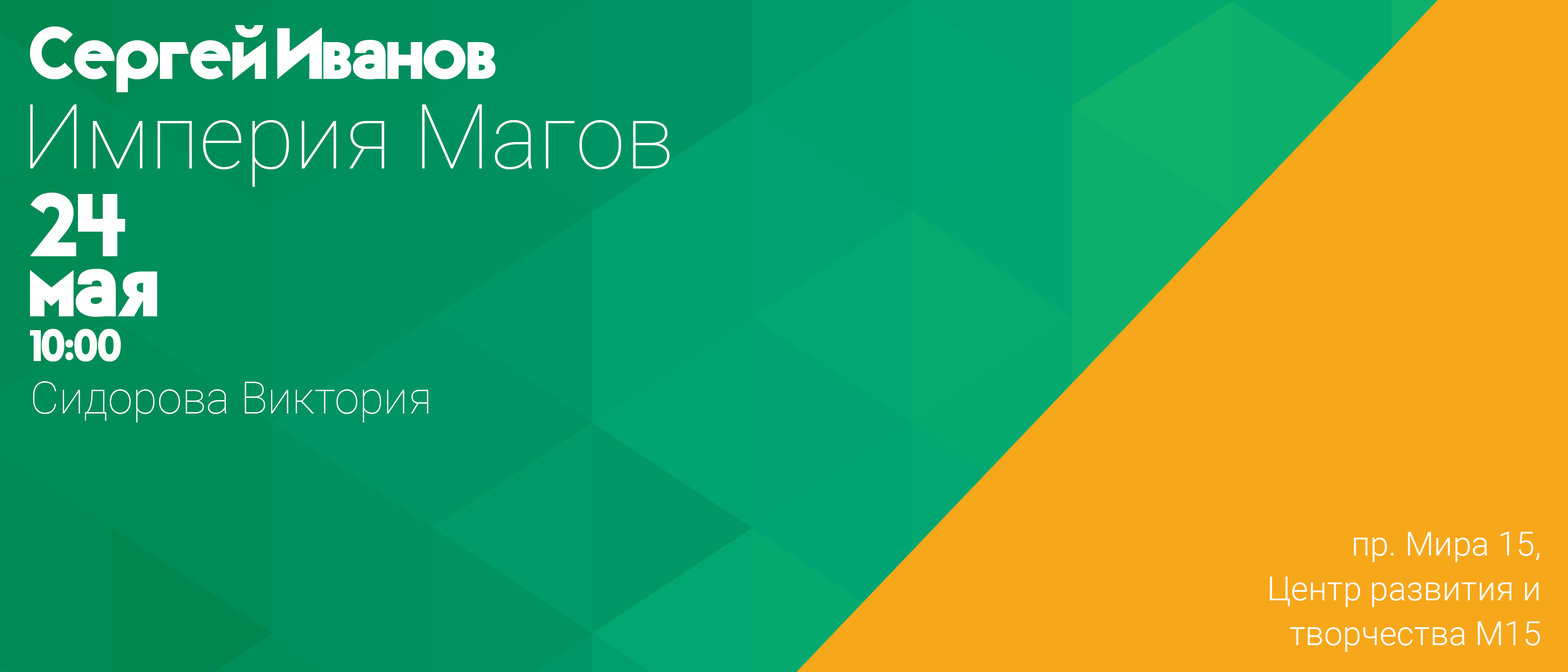
<style>
.page{position:relative;width:1568px;height:672px;background:#f7a71a}
.page>*{position:absolute;margin:0}
.t1{font:72.9px "TypoGraphica";color:#ffffff}
.t2{font:90.1px "Roboto-Thin";color:#ffffff}
.t3{font:44.8px/44.8px "TypoGraphica";color:#ffffff}
.t4{font:89.6px/80.3px "TypoGraphica";color:#ffffff}
.t5{font:89.6px/59.7px "TypoGraphica";color:#ffffff}
.t6{font:44.8px "Roboto-Thin";color:#ffffff}
.t7{font:33.6px/44.8px "Roboto-Light";color:#ffffff}
</style>
<div class="page">
<p class="t1" style="left:30px;top:25px;width:466px;height:67px">Сергей Иванов</p>
<p class="t2" style="left:30px;top:104px;width:640px;height:83px">Империя Магов</p>
<p class="t3" style="left:30px;top:193px;width:127px;height:168px"><span class="t4">24<br></span><span class="t5">мая<br></span>10:00</p>
<p class="t6" style="left:33px;top:381px;width:396px;height:41px">Сидорова Виктория</p>
<p class="t7" style="left:1270px;top:531px;width:270px;height:121px;text-align:right">пр. Мира 15, <br>Центр развития и творчества М15</p>
</div>
